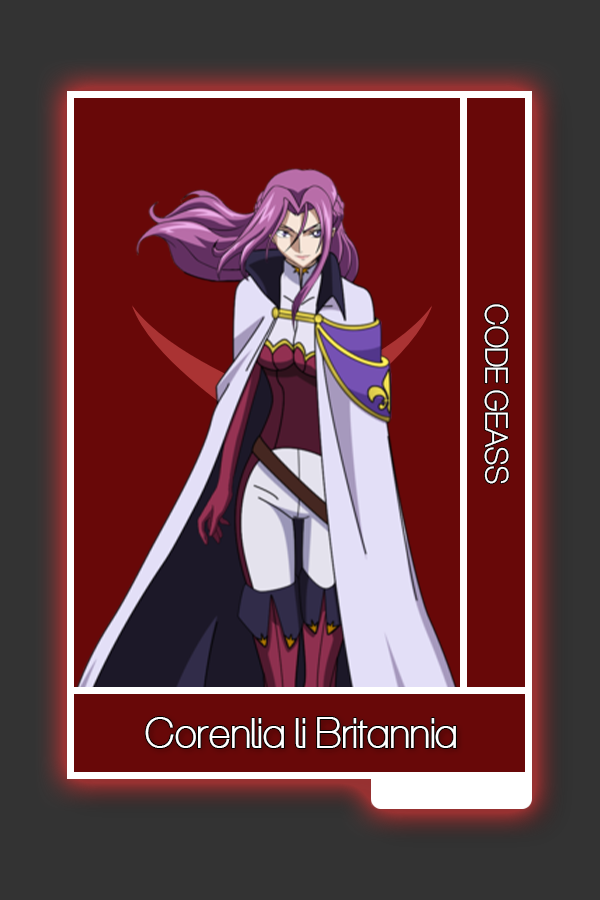
<style>
.page{position:relative;width:600px;height:900px;background:#680808}
.page>*{position:absolute;margin:0}
.t1{font:31.2px "Aliquam";color:#ffffff}
.t2{font:43.2px "Aliquam";color:#ffffff}
</style>
<div class="page">
<p class="t1" style="left:484px;top:304px;width:25px;height:180px;rotate:90deg">CODE GEASS</p>
<p class="t2" style="left:145px;top:717px;width:311px;height:31px">Corenlia li Britannia</p>
</div>
